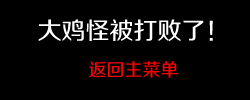
<style>
.page{position:relative;width:250px;height:100px;background:#000000}
.page>*{position:absolute;margin:0}
.t1{font:24px "FZZZHUNHJW--GB1-0";color:#ffffff}
.t2{font:18px "FZZZHUNHJW--GB1-0";color:#ff0000}
</style>
<div class="page">
<p class="t1" style="left:38px;top:19px;width:175px;height:59px;text-align:center">大鸡怪被打败了！<br><span class="t2">返回主菜单</span></p>
</div>
